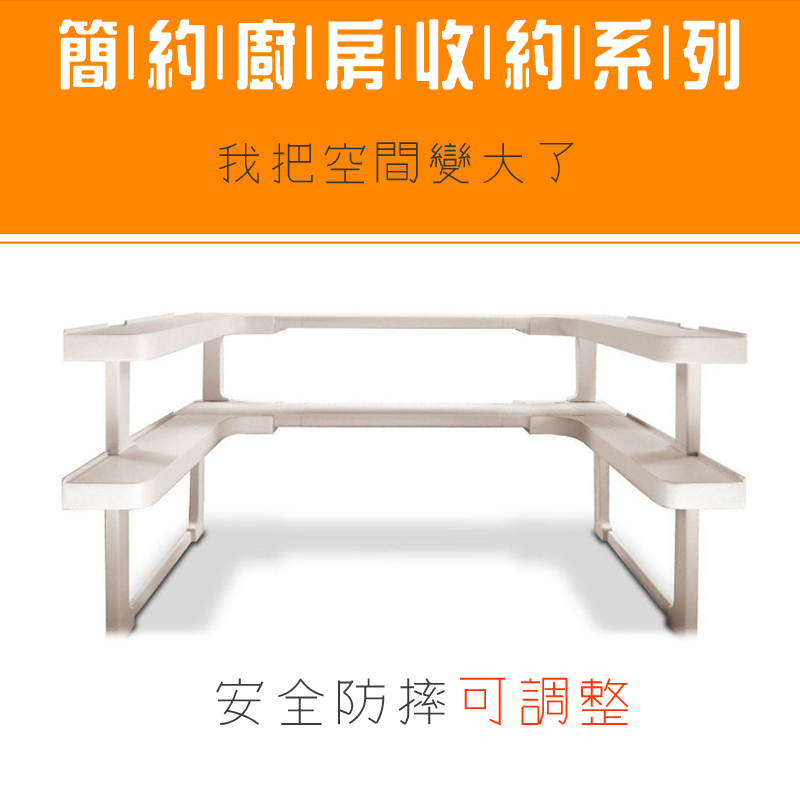
<style>
.page{position:relative;width:800px;height:800px;background:#ffffff}
.page>*{position:absolute;margin:0}
.t1{font:74.6px "HanWangZonYi";letter-spacing:0.1em;color:#ffffff;scale:0.83 1}
.t2{font:48px "winman-tun33014";letter-spacing:0.1em;color:#373737}
.t3{font:55.3px "winman-tun33014";letter-spacing:0.1em;color:#3b3b3b}
.t4{font:55.3px "winman-tun33014";letter-spacing:0.1em;color:#ff3600}
</style>
<div class="page">
<p class="t1" style="left:59px;top:19px;width:681px;height:71px">簡|約|廚|房|收|約|系|列</p>
<p class="t2" style="left:219px;top:142px;width:355px;height:42px">我把空間變大了</p>
<p class="t3" style="left:216px;top:677px;width:413px;height:49px">安全防摔<span class="t4">可調整</span></p>
</div>
